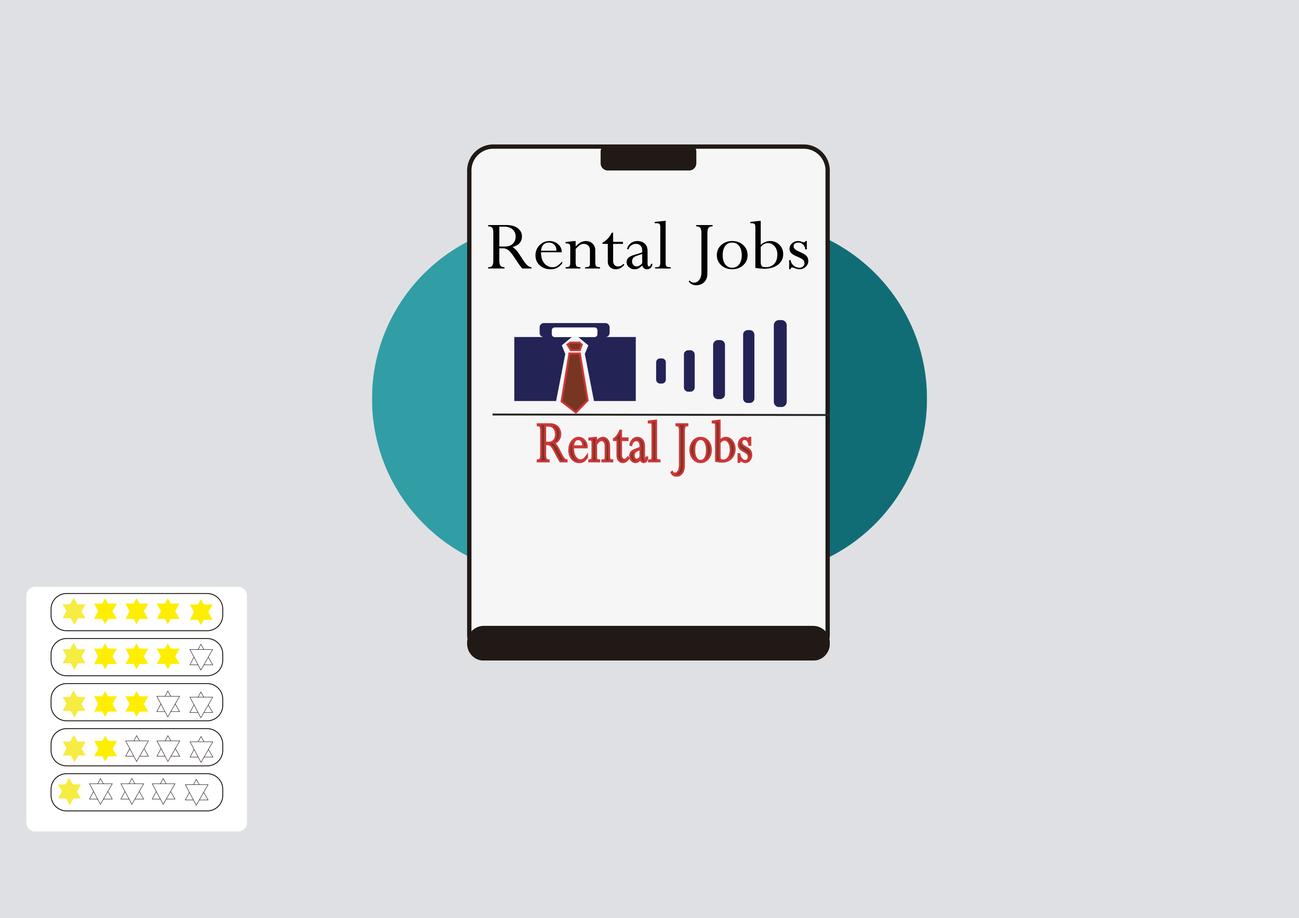
<style>
.page{position:relative;width:1299px;height:918px;background:#dfe0e3}
.page>*{position:absolute;margin:0}
.t1{font:75.9px "Perpetua";color:#000000;scale:1.04 1}
</style>
<div class="page">
<p class="t1" style="left:488px;top:221px;width:320px;height:64px">Rental Jobs</p>
</div>
